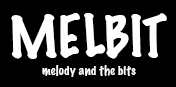
<style>
.page{position:relative;width:176px;height:87px;background:#000000}
.page>*{position:absolute;margin:0}
.t1{font:52px "MarkerFelt-Thin";color:#ffffff}
.t2{font:12px "MarkerFelt-Thin";color:#ffffff}
</style>
<div class="page">
<p class="t1" style="left:11px;top:13px;width:156px;height:46px">MELBIT</p>
<p class="t2" style="left:42px;top:65px;width:94px;height:12px">melody and the bits</p>
</div>
